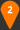
<style>
.page{position:relative;width:20px;height:30px;background:#ff7800}
.page>*{position:absolute;margin:0}
.t1{font:9px "OpenSans";color:#ffffff;font-weight:bold}
</style>
<div class="page">
<p class="t1" style="left:7px;top:6px;width:6px;height:8px">2</p>
</div>
